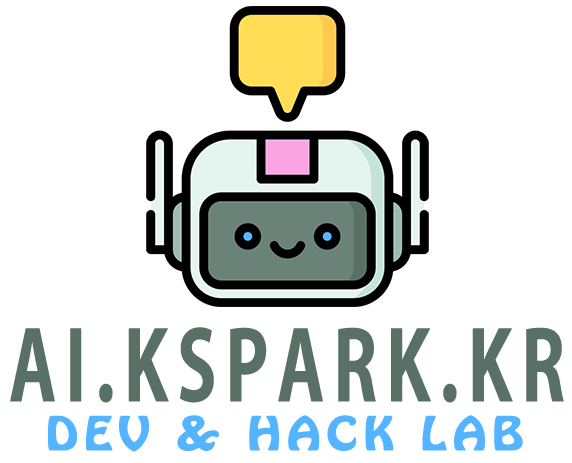
<style>
.page{position:relative;width:572px;height:463px;background:#ffffff}
.page>*{position:absolute;margin:0}
.t1{font:94.4px "AdobeGothicStd-Bold";letter-spacing:0.1em;color:#597067;font-weight:bold;scale:0.75 1}
.t2{font:40.8px "HoboStd";letter-spacing:0.1em;color:#54b4ff;font-weight:bold;scale:1.17 1}
</style>
<div class="page">
<p class="t1" style="left:10px;top:327px;width:554px;height:76px">AI.KSPARK.KR</p>
<p class="t2" style="left:48px;top:415px;width:475px;height:37px">DEV &amp; HACK LAB</p>
</div>
